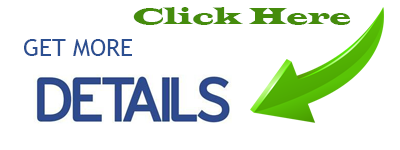
<style>
.page{position:relative;width:400px;height:150px;background:#ffffff}
.page>*{position:absolute;margin:0}
.t1{font:24px "LatinWide";color:#458c0c}
.t2{font:24px "TrebuchetMS";color:#2c4f91}
</style>
<div class="page">
<p class="t1" style="left:133px;top:7px;width:218px;height:18px">Click Here</p>
<p class="t2" style="left:24px;top:39px;width:108px;height:17px">GET MORE</p>
</div>
